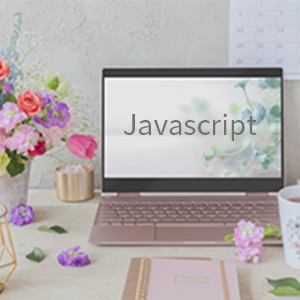
<style>
.page{position:relative;width:300px;height:300px}
.page>*{position:absolute;margin:0}
.t1{font:27.8px "SourceHanSansJP-Regular";color:#727171}
</style>
<div class="page">
<p class="t1" style="left:123px;top:113px;width:134px;height:28px">Javascript</p>
</div>
